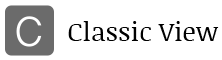
<style>
.page{position:relative;width:222px;height:60px;background:#ffffff}
.page>*{position:absolute;margin:0}
.t1{font:26.5px "NoticiaText-Regular";color:#000000}
</style>
<div class="page">
<p class="t1" style="left:68px;top:21px;width:151px;height:20px">Classic View</p>
</div>
